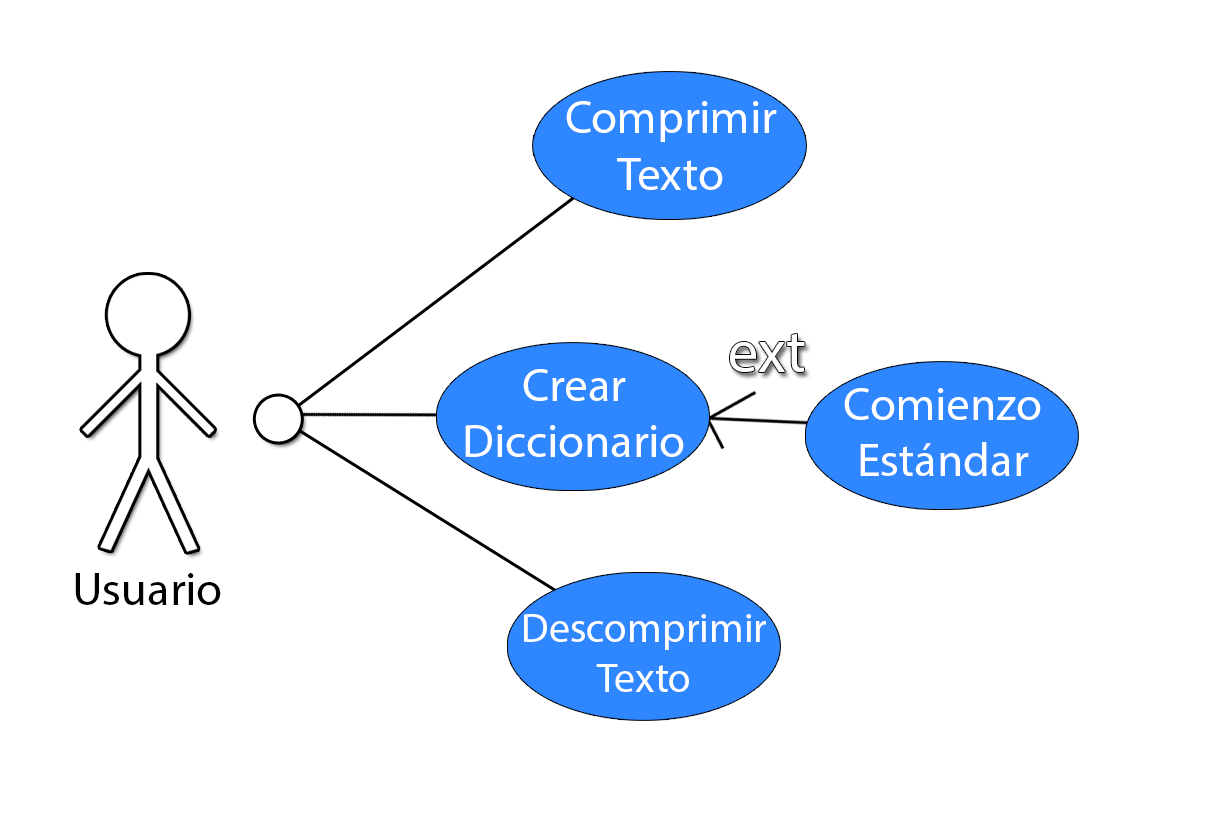
<style>
.page{position:relative;width:1216px;height:836px;background:#ffffff}
.page>*{position:absolute;margin:0}
.t1{font:47.2px "MyriadPro-Regular";color:#ffffff}
.t2{font:59.8px "MyriadPro-Regular";color:#ffffff}
.t3{font:47.2px "MyriadPro-Regular";color:#000000}
.t4{font:41.5px "MyriadPro-Regular";color:#ffffff}
</style>
<div class="page">
<p class="t1" style="left:566px;top:101px;width:211px;height:89px;text-align:center">Comprimir<br>Texto</p>
<p class="t2" style="left:730px;top:333px;width:75px;height:39px">ext</p>
<p class="t1" style="left:465px;top:369px;width:219px;height:88px;text-align:center">Crear<br>Diccionario</p>
<p class="t1" style="left:844px;top:388px;width:197px;height:88px;text-align:center">Comienzo<br>Estándar</p>
<p class="t3" style="left:75px;top:573px;width:146px;height:32px">Usuario</p>
<p class="t4" style="left:524px;top:614px;width:242px;height:78px;text-align:center">Descomprimir<br>Texto</p>
</div>
